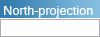
<style>
.page{position:relative;width:100px;height:37px;background:#ffffff}
.page>*{position:absolute;margin:0}
.t1{font:14px "Latha";color:#ffffff}
</style>
<div class="page">
<p class="t1" style="left:4px;top:6px;width:89px;height:12px">North-projection</p>
</div>
